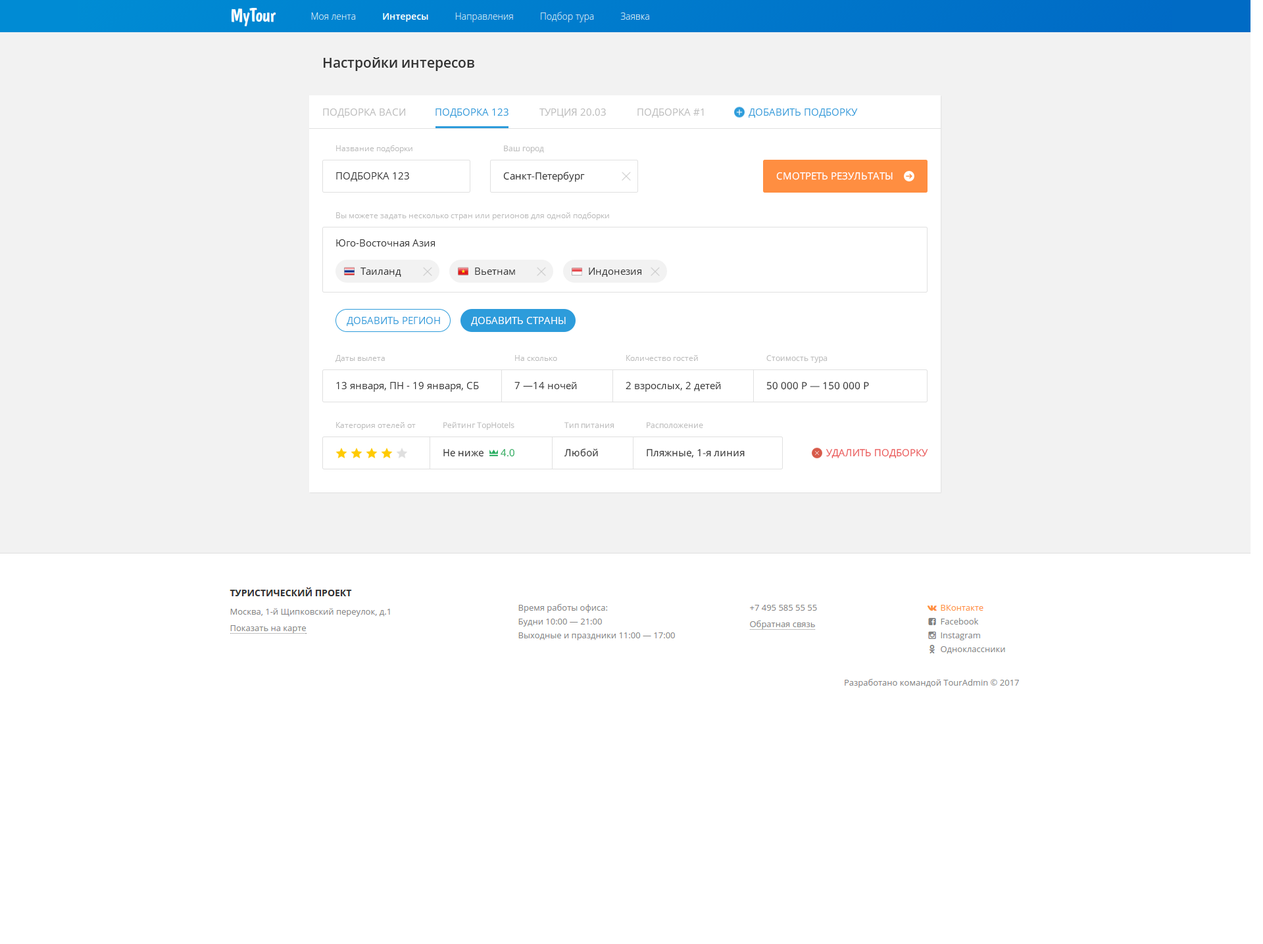
<style>
.page{position:relative;width:1263px;height:944px;background:#ffffff}
.page>*{position:absolute;margin:0}
.t1{font:13.8px "OpenSans-Semibold";color:#333333}
.t2{font:9.9px "OpenSans";color:#bdbdbd;text-transform:uppercase}
.t3{font:9.9px "OpenSans";color:#2d9cdb;text-transform:uppercase}
.t4{font:7.9px "OpenSans";color:#bdbdbd}
.t5{font:9.9px "OpenSans";color:#333333;text-transform:uppercase}
.t6{font:9.9px "OpenSans";color:#333333}
.t7{font:9.9px "OpenSans";color:#ffffff;text-transform:uppercase}
.t8{font:9.9px "OpenSans";color:#27ae60}
.t9{font:9.9px "OpenSans";color:#eb5757}
</style>
<div class="page">
<p class="t1" style="left:324px;top:57px;width:150px;height:14px">Настройки интересов</p>
<p class="t2" style="left:323px;top:109px;width:82px;height:9px">ПОДБОРКА ВАСИ</p>
<p class="t3" style="left:435px;top:109px;width:73px;height:9px">ПОДБОРКА 123</p>
<p class="t2" style="left:539px;top:109px;width:67px;height:9px">ТУРЦИЯ 20.03</p>
<p class="t2" style="left:637px;top:109px;width:67px;height:9px">ПОДБОРКА #1</p>
<p class="t3" style="left:748px;top:109px;width:110px;height:9px">ДОБАВИТЬ ПОДБОРКУ</p>
<p class="t4" style="left:336px;top:145px;width:76px;height:8px">Название подборки</p>
<p class="t4" style="left:504px;top:145px;width:40px;height:9px">Ваш город</p>
<p class="t5" style="left:336px;top:172px;width:73px;height:10px">ПОДБОРКА 123</p>
<p class="t6" style="left:503px;top:172px;width:82px;height:10px">Санкт-Петербург</p>
<p class="t7" style="left:776px;top:172px;width:116px;height:8px">СМОТРЕТЬ РЕЗУЛЬТАТЫ</p>
<p class="t4" style="left:336px;top:212px;width:273px;height:8px">Вы можете задать несколько стран или регионов для одной подборки</p>
<p class="t6" style="left:336px;top:239px;width:99px;height:8px">Юго-Восточная Азия</p>
<p class="t6" style="left:360px;top:268px;width:41px;height:9px">Таиланд</p>
<p class="t6" style="left:475px;top:268px;width:40px;height:7px">Вьетнам</p>
<p class="t6" style="left:589px;top:268px;width:52px;height:9px">Индонезия</p>
<p class="t3" style="left:347px;top:317px;width:93px;height:9px">ДОБАВИТЬ РЕГИОН</p>
<p class="t7" style="left:471px;top:317px;width:95px;height:9px">ДОБАВИТЬ СТРАНЫ</p>
<p class="t4" style="left:335px;top:355px;width:50px;height:7px">Даты вылета</p>
<p class="t4" style="left:515px;top:355px;width:42px;height:6px">На сколько</p>
<p class="t4" style="left:626px;top:355px;width:72px;height:6px">Количество гостей</p>
<p class="t4" style="left:766px;top:355px;width:61px;height:9px">Стоимость тура</p>
<p class="t6" style="left:336px;top:382px;width:143px;height:10px">13 января, ПН - 19 января, СБ</p>
<p class="t6" style="left:514px;top:382px;width:63px;height:7px">7 —14 ночей</p>
<p class="t6" style="left:625px;top:382px;width:96px;height:10px">2 взрослых, 2 детей</p>
<p class="t6" style="left:766px;top:382px;width:103px;height:8px">50 000 Р — 150 000 Р</p>
<p class="t4" style="left:336px;top:422px;width:80px;height:8px">Категория отелей от</p>
<p class="t4" style="left:443px;top:422px;width:71px;height:9px">Рейтинг TopHotels</p>
<p class="t4" style="left:564px;top:422px;width:50px;height:7px">Тип питания</p>
<p class="t4" style="left:646px;top:422px;width:57px;height:7px">Расположение</p>
<p class="t6" style="left:443px;top:449px;width:41px;height:8px">Не ниже</p>
<p class="t8" style="left:500px;top:449px;width:14px;height:8px">4.0</p>
<p class="t6" style="left:564px;top:449px;width:34px;height:8px">Любой</p>
<p class="t6" style="left:646px;top:449px;width:98px;height:9px">Пляжные, 1-я линия</p>
<p class="t9" style="left:825px;top:449px;width:103px;height:9px">УДАЛИТЬ ПОДБОРКУ</p>
</div>
